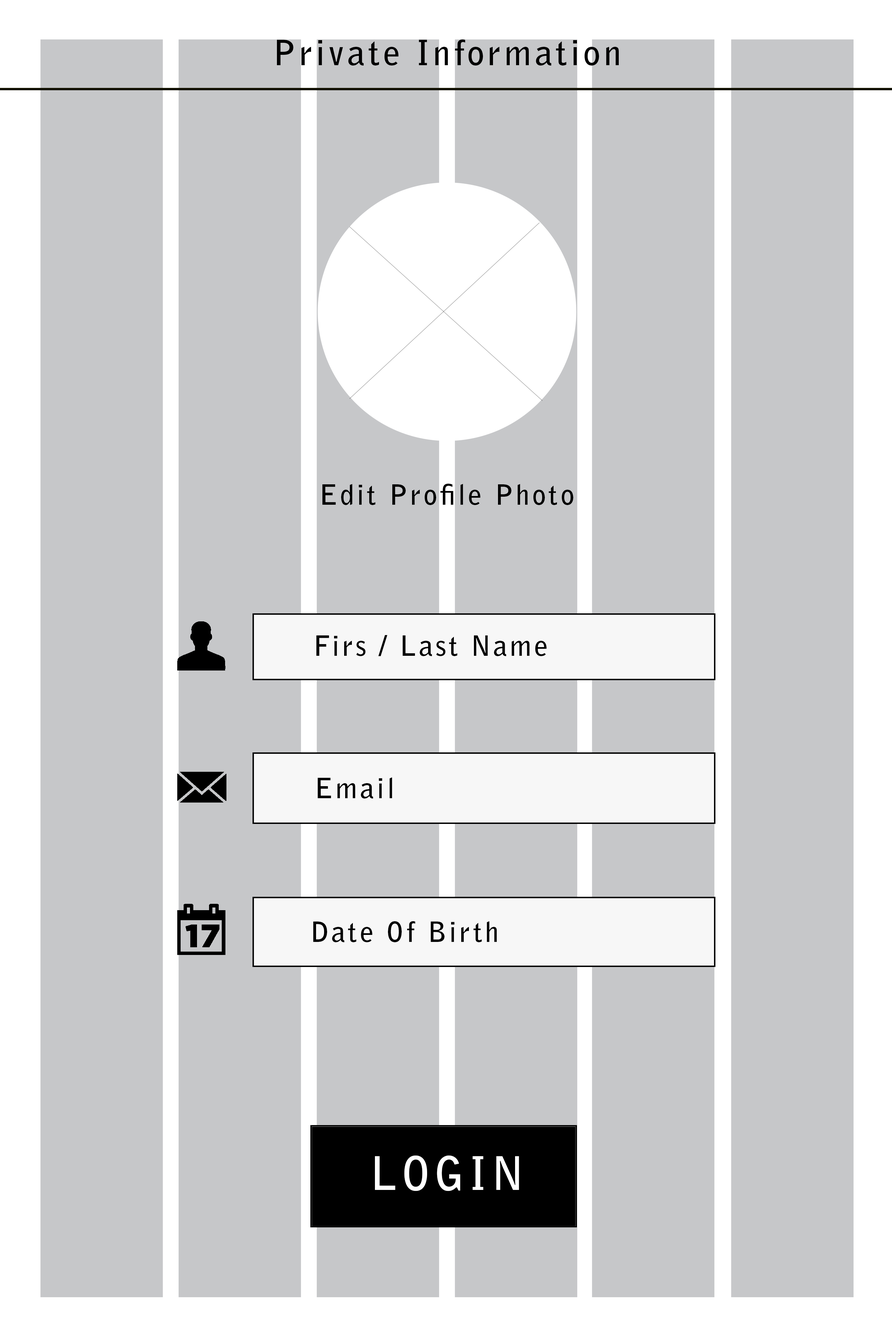
<style>
.page{position:relative;width:892px;height:1337px;background:#c6c7c9}
.page>*{position:absolute;margin:0}
.t1{font:34.8px "BellGothicStd-Bold";letter-spacing:0.09em;color:#000000}
.t2{font:27.9px "BellGothicStd-Bold";letter-spacing:0.09em;color:#000000}
.t3{font:46px "BellGothicStd-Bold";letter-spacing:0.09em;color:#ffffff}
</style>
<div class="page">
<p class="t1" style="left:277px;top:39px;width:342px;height:27px">Private Information</p>
<p class="t2" style="left:322px;top:484px;width:251px;height:21px">Edit Profile Photo</p>
<p class="t2" style="left:316px;top:635px;width:230px;height:21px">Firs / Last Name</p>
<p class="t2" style="left:318px;top:778px;width:74px;height:21px">Email</p>
<p class="t2" style="left:313px;top:921px;width:184px;height:21px">Date Of Birth</p>
<p class="t3" style="left:375px;top:1155px;width:144px;height:37px">LOGIN</p>
</div>
